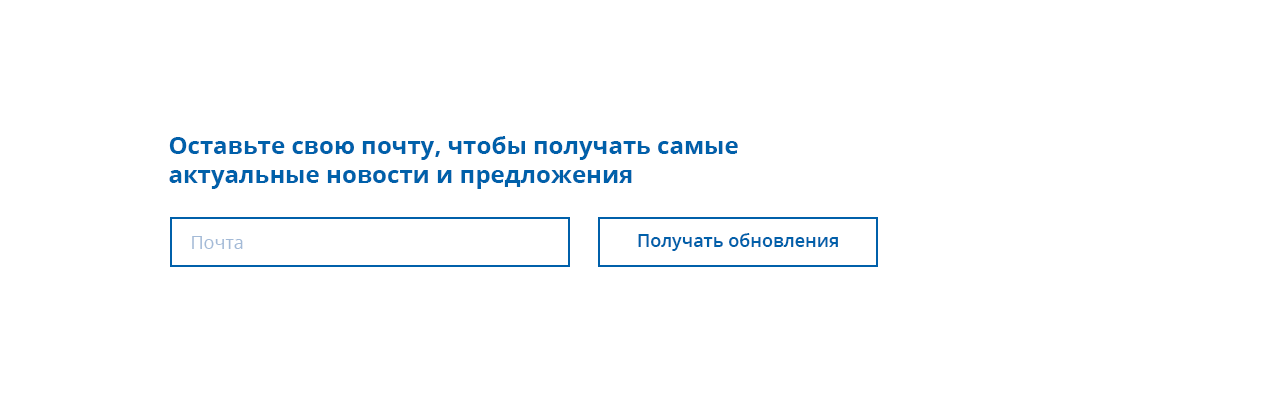
<style>
.page{position:relative;width:1280px;height:400px;background:#ffffff}
.page>*{position:absolute;margin:0}
.t1{font:24px "OpenSans-Bold";color:#0060aa}
.t2{font:18px "OpenSans-Semibold";color:#0060aa}
.t3{font:18px "OpenSans";color:#a3bad7}
</style>
<div class="page">
<p class="t1" style="left:169px;top:136px;width:569px;height:53px">Оставьте свою почту, чтобы получать самые актуальные новости и предложения</p>
<p class="t2" style="left:638px;top:233px;width:200px;height:18px">Получать обновления</p>
<p class="t3" style="left:192px;top:236px;width:51px;height:13px">Почта</p>
</div>
